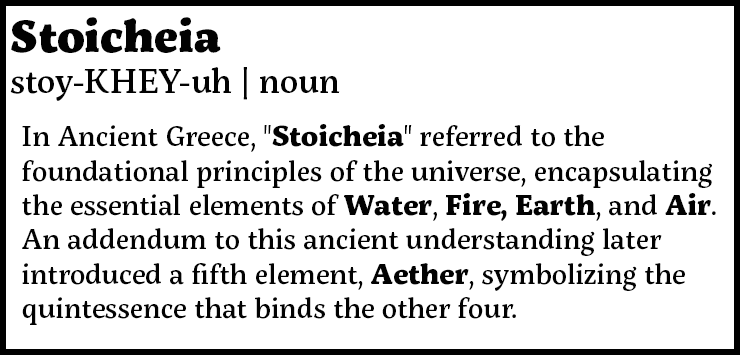
<style>
.page{position:relative;width:740px;height:355px;background:#ffffff}
.page>*{position:absolute;margin:0}
.t1{font:34.3px "ServusSlab-Medium";color:#020202}
.t2{font:44.1px "ServusSlab-Black";color:#020202}
.t3{font:28.6px "ServusSlab-Medium";color:#020202}
.t4{font:28.6px "ServusSlab-ExtraBold";color:#020202}
</style>
<div class="page">
<p class="t1" style="left:10px;top:17px;width:330px;height:84px"><span class="t2">Stoicheia<br></span>stoy-KHEY-uh | noun</p>
<p class="t3" style="left:22px;top:124px;width:694px;height:201px">In Ancient Greece, "<span class="t4">Stoicheia</span>" referred to the foundational principles of the universe, encapsulating the essential elements of <span class="t4">Water</span>, <span class="t4">Fire, Earth</span>, and <span class="t4">Air</span>. An addendum to this ancient understanding later introduced a fifth element, <span class="t4">Aether</span>, symbolizing the quintessence that binds the other four.</p>
</div>
